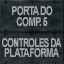
<style>
.page{position:relative;width:64px;height:64px}
.page>*{position:absolute;margin:0}
.t1{font:12px/10.7px "Arial-BoldMT";letter-spacing:-0.08em;color:#a6a6a6;text-transform:uppercase;scale:0.75 1}
.t2{font:12px/10.7px "Arial-BoldMT";letter-spacing:-0.08em;color:#a6a6a6;text-transform:uppercase;scale:0.7 1}
</style>
<div class="page">
<p class="t1" style="left:12px;top:6px;width:41px;height:21px;text-align:center">PORTA DO<br>COMP. 5</p>
<p class="t2" style="left:2px;top:38px;width:60px;height:20px;text-align:center">controleS da<br><span class="t1">plataforma</span></p>
</div>
